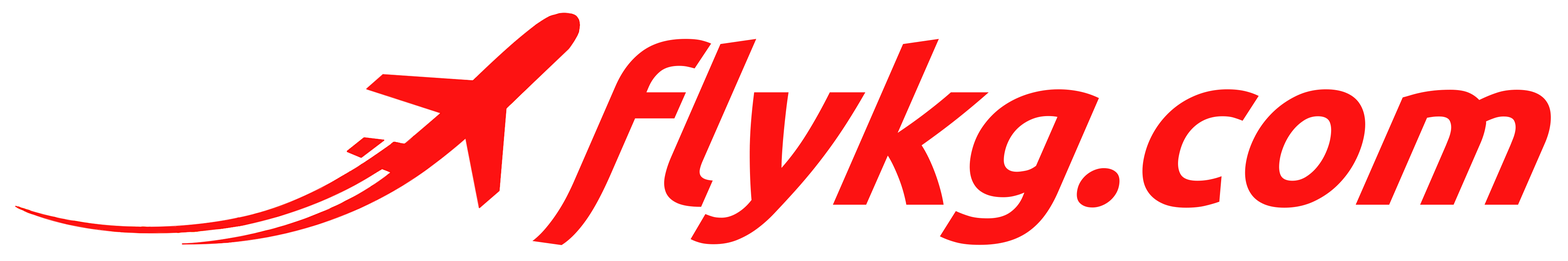
<style>
.page{position:relative;width:1568px;height:261px;background:#ffffff}
.page>*{position:absolute;margin:0}
.t1{font:213.8px "Ubuntu-BoldItalic";letter-spacing:-0.05em;color:#fd1212;font-weight:bold;font-style:italic;scale:1.05 1}
</style>
<div class="page">
<p class="t1" style="left:532px;top:39px;width:1019px;height:206px">flykg.com</p>
</div>
